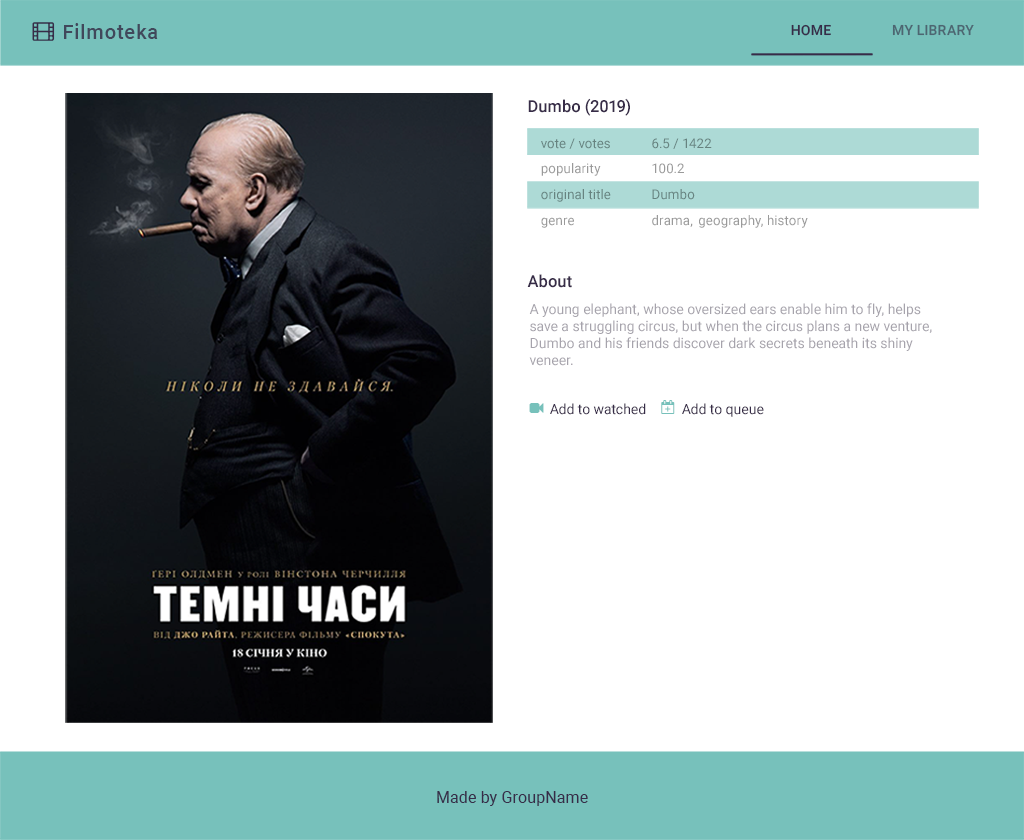
<style>
.page{position:relative;width:1024px;height:840px;background:#ffffff}
.page>*{position:absolute;margin:0}
.t1{font:20px "Roboto-Medium";letter-spacing:0.05em;color:#41485b}
.t2{font:14px "Roboto-Medium";letter-spacing:0.01em;color:#372c48;text-transform:uppercase}
.t3{font:14px "Roboto-Medium";letter-spacing:0.01em;color:#4d6671;text-transform:uppercase}
.t4{font:16.6px "Roboto-Medium";color:#372c48}
.t5{font:13.3px/25.7px "Roboto-Regular";letter-spacing:0.01em}
.t6{font:13.3px/25.7px "Roboto-Regular";letter-spacing:0.01em;color:#9a9a9a}
.t7{font:14px/17px "Roboto-Regular";color:#a6a3ac}
.t8{font:14px "Roboto-Regular";color:#372c48}
.t9{font:16px "Roboto-Regular";letter-spacing:0.01em;color:#372c48}
</style>
<div class="page">
<p class="t1" style="left:64px;top:23px;width:94px;height:16px">Filmoteka</p>
<p class="t2" style="left:791px;top:24px;width:40px;height:12px">Home</p>
<p class="t3" style="left:892px;top:24px;width:82px;height:12px">My library</p>
<p class="t4" style="left:528px;top:98px;width:102px;height:18px">Dumbo (2019)</p>
<p class="t5" style="left:541px;top:138px;width:70px;height:90px">vote / votes<br>popularity<br>original title <br>genre</p>
<p class="t6" style="left:652px;top:138px;width:156px;height:90px">6.5 / 1422<br>100.2<br>Dumbo<br>drama, geography, history</p>
<p class="t4" style="left:527px;top:274px;width:45px;height:14px">About</p>
<p class="t7" style="left:529px;top:303px;width:403px;height:63px">A young elephant, whose oversized ears enable him to fly, helps save a struggling circus, but when the circus plans a new venture, Dumbo and his friends discover dark secrets beneath its shiny veneer.</p>
<p class="t8" style="left:550px;top:403px;width:96px;height:12px">Add to watched</p>
<p class="t8" style="left:682px;top:403px;width:82px;height:14px">Add to queue</p>
<p class="t9" style="left:437px;top:791px;width:151px;height:15px">Made by GroupName</p>
</div>
